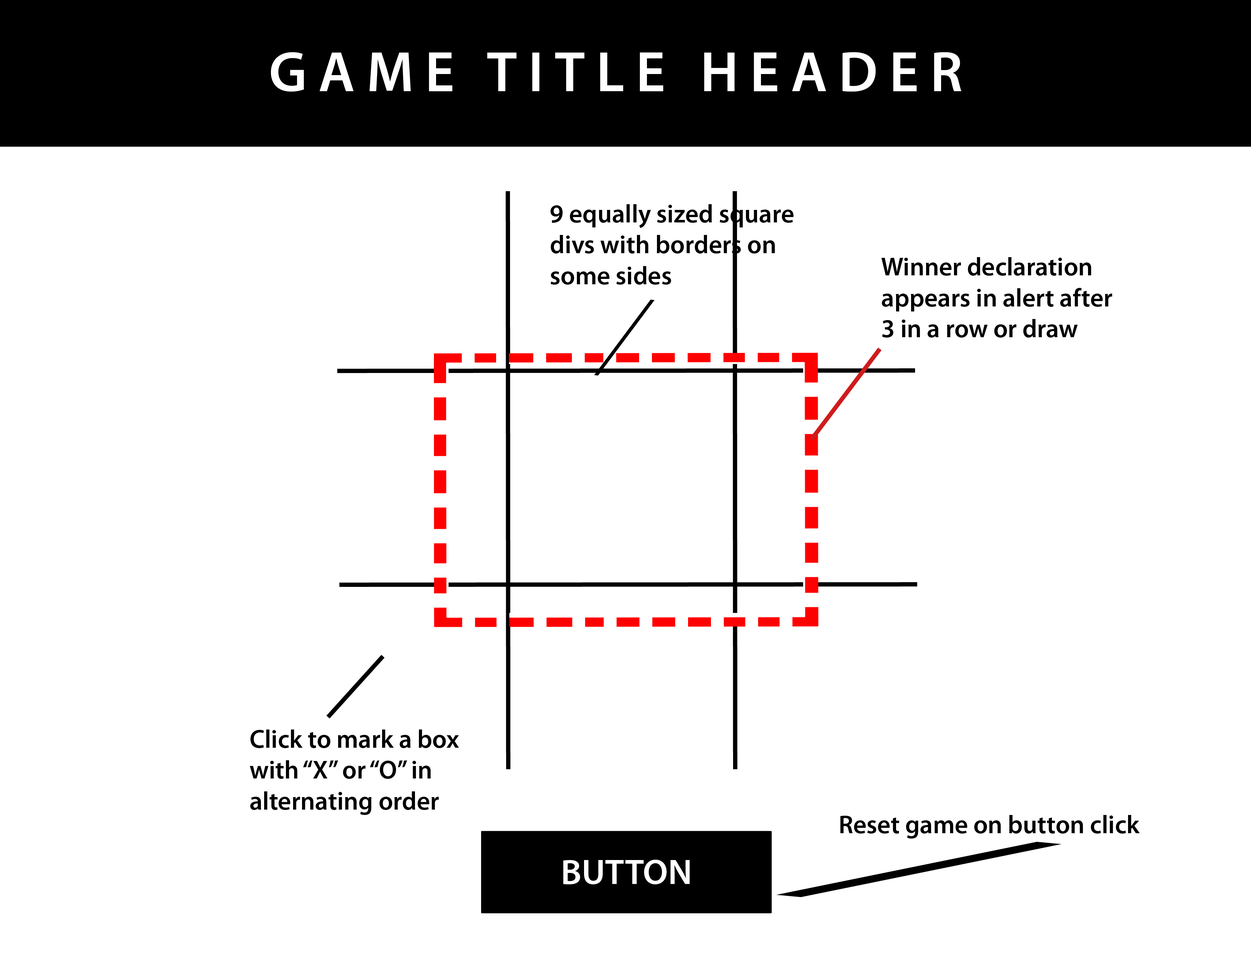
<style>
.page{position:relative;width:1251px;height:953px;background:#ffffff}
.page>*{position:absolute;margin:0}
.t1{font:57.2px "MyriadPro-Semibold";letter-spacing:0.2em;color:#ffffff}
.t2{font:25.7px "MyriadPro-Semibold";color:#000000}
.t3{font:35.8px "MyriadPro-Semibold";color:#ffffff}
</style>
<div class="page">
<p class="t1" style="left:271px;top:52px;width:691px;height:40px">GAME TITLE HEADER</p>
<p class="t2" style="left:551px;top:204px;width:243px;height:81px">9 equally sized square<br>divs with borders on<br>some sides</p>
<p class="t2" style="left:882px;top:257px;width:231px;height:81px">Winner declaration<br>appears in alert after<br>3 in a row or draw</p>
<p class="t2" style="left:250px;top:729px;width:209px;height:86px">Click to mark a box<br>with “X” or “O” in<br>alternating order</p>
<p class="t2" style="left:841px;top:815px;width:299px;height:23px">Reset game on button click</p>
<p class="t3" style="left:563px;top:860px;width:127px;height:24px">BUTTON</p>
</div>
